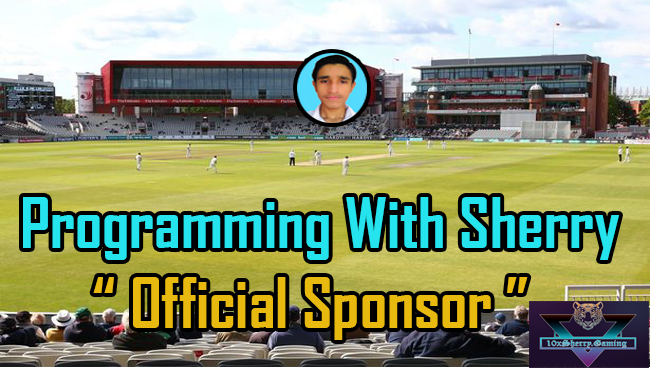
<style>
.page{position:relative;width:650px;height:368px}
.page>*{position:absolute;margin:0}
.t1{font:66.7px "AgencyFB-Bold";color:#26e4ee}
.t2{font:66.7px "AgencyFB-Bold";color:#e8b90e}
</style>
<div class="page">
<p class="t1" style="left:23px;top:197px;width:596px;height:143px">Programming With Sherry<br>  <span class="t2">“ Official Sponsor ”</span></p>
</div>
